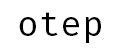
<style>
.page{position:relative;width:120px;height:50px;background:#ffffff}
.page>*{position:absolute;margin:0}
.t1{font:36px "FiraMono-Regular";color:#000000}
</style>
<div class="page">
<p class="t1" style="left:19px;top:12px;width:82px;height:31px">otep</p>
</div>
